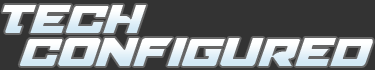
<style>
.page{position:relative;width:375px;height:70px;background:#333333}
.page>*{position:absolute;margin:0}
.t1{font:48px "AircruiserLightItalic";letter-spacing:0.01em;color:#ecf5fb}
.t2{font:48px "AircruiserLightItalic";letter-spacing:0.01em}
</style>
<div class="page">
<p class="t1" style="left:2px;top:5px;width:145px;height:28px">Tech</p>
<p class="t2" style="left:19px;top:38px;width:354px;height:28px">Configured</p>
</div>
